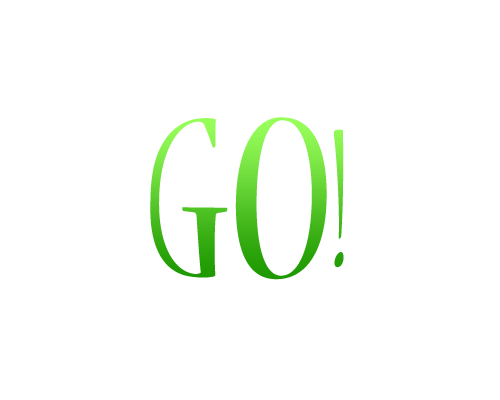
<style>
.page{position:relative;width:500px;height:400px;background:#ffffff}
.page>*{position:absolute;margin:0}
.t1{font:208.3px "NuevaStd-Cond";letter-spacing:-0.02em}
</style>
<div class="page">
<p class="t1" style="left:150px;top:117px;width:194px;height:163px">GO!</p>
</div>
